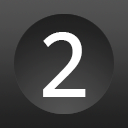
<style>
.page{position:relative;width:128px;height:128px}
.page>*{position:absolute;margin:0}
.t1{font:100px "Consolas";color:#ffffff}
</style>
<div class="page">
<p class="t1" style="left:43px;top:32px;width:43px;height:65px">2</p>
</div>
